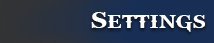
<style>
.page{position:relative;width:214px;height:43px}
.page>*{position:absolute;margin:0}
.t1{font:25px "GodOfWar";color:#ffffff}
</style>
<div class="page">
<p class="t1" style="left:91px;top:12px;width:114px;height:20px">Settings</p>
</div>
